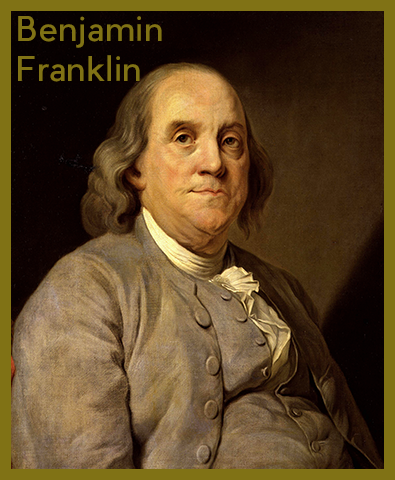
<style>
.page{position:relative;width:395px;height:480px}
.page>*{position:absolute;margin:0}
.t1{font:33.3px "PierSans";color:#807215}
</style>
<div class="page">
<p class="t1" style="left:18px;top:16px;width:144px;height:66px">Benjamin<br>Franklin</p>
</div>
